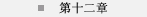
<style>
.page{position:relative;width:147px;height:17px;background:#f1f1f1}
.page>*{position:absolute;margin:0}
.t1{font:12px "SimSun";color:#000000;font-weight:bold}
</style>
<div class="page">
<p class="t1" style="left:39px;top:0px;width:89px;height:17px">第十二章</p>
</div>
